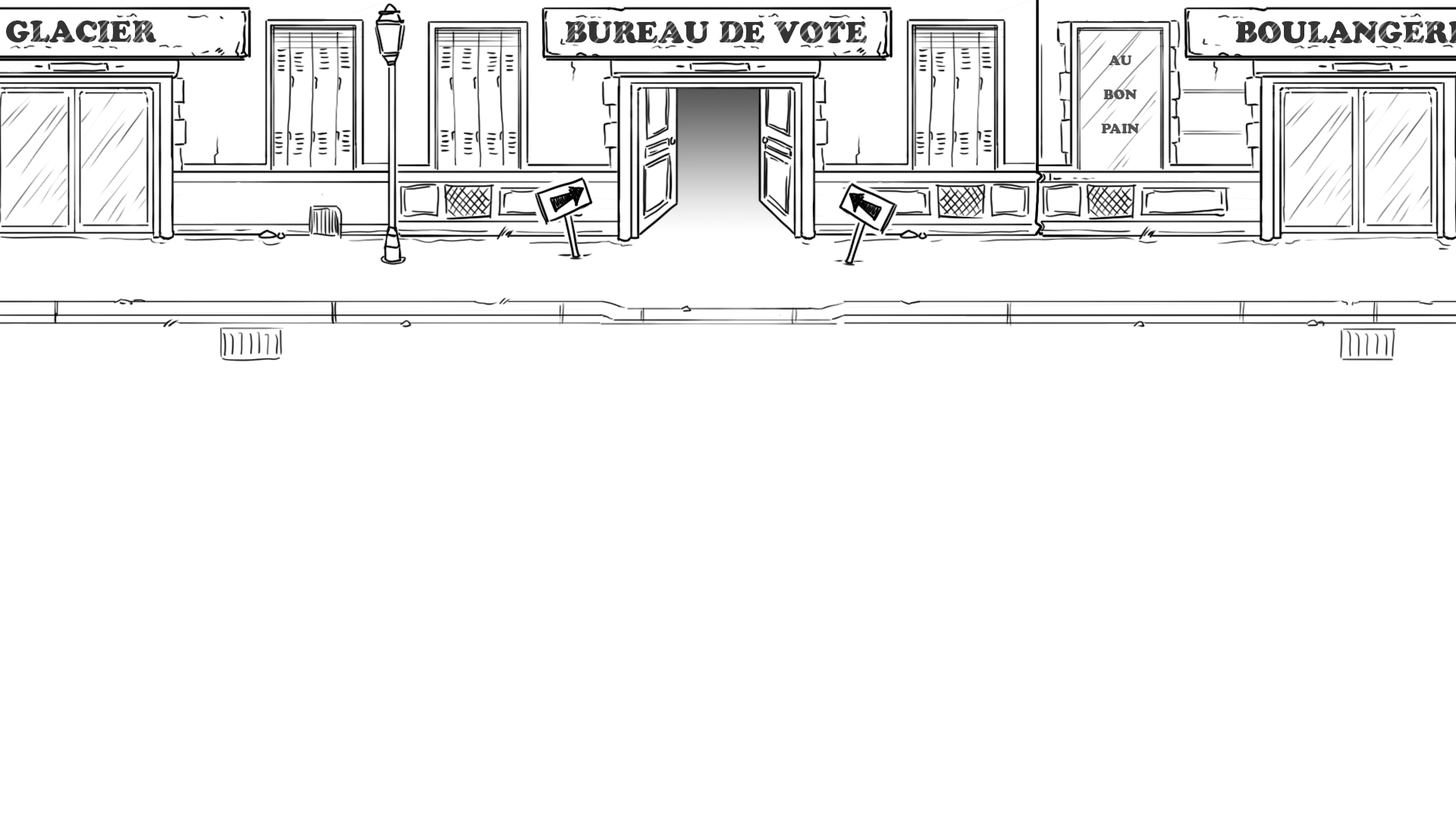
<style>
.page{position:relative;width:1456px;height:819px;background:#ffffff}
.page>*{position:absolute;margin:0}
.t1{font:29.6px "CooperBlackStd";color:#343434}
.t2{font:13.6px "CooperBlackStd";color:#555555}
</style>
<div class="page">
<p class="t1" style="left:6px;top:20px;width:150px;height:22px">GLACIER</p>
<p class="t1" style="left:565px;top:21px;width:302px;height:22px">BUREAU DE VOTE</p>
<p class="t2" style="left:1101px;top:55px;width:38px;height:78px;text-align:center">AU<br><br>BON<br><br>PAIN</p>
</div>
